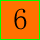
<style>
.page{position:relative;width:40px;height:40px;background:#ff7200}
.page>*{position:absolute;margin:0}
.t1{font:30px "SimSun";color:#000000}
</style>
<div class="page">
<p class="t1" style="left:14px;top:8px;width:13px;height:22px">6</p>
</div>
